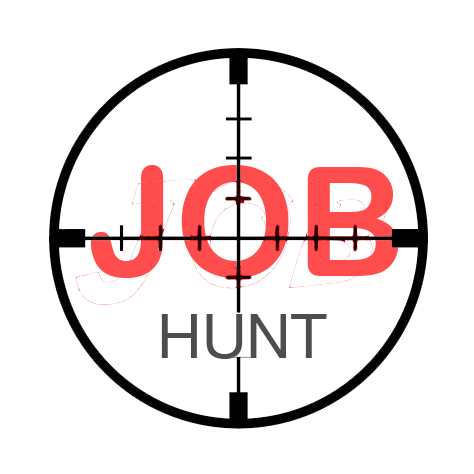
<style>
.page{position:relative;width:474px;height:474px;background:#ffffff}
.page>*{position:absolute;margin:0}
.t1{font:152.1px "ArialRoundedMTBold";color:#ff4d4d}
.t2{font:62px "HelveticaNeue";color:#4d4d4d}
</style>
<div class="page">
<p class="t1" style="left:90px;top:165px;width:309px;height:113px">JOB</p>
<p class="t2" style="left:161px;top:314px;width:166px;height:45px">HUNT</p>
</div>
